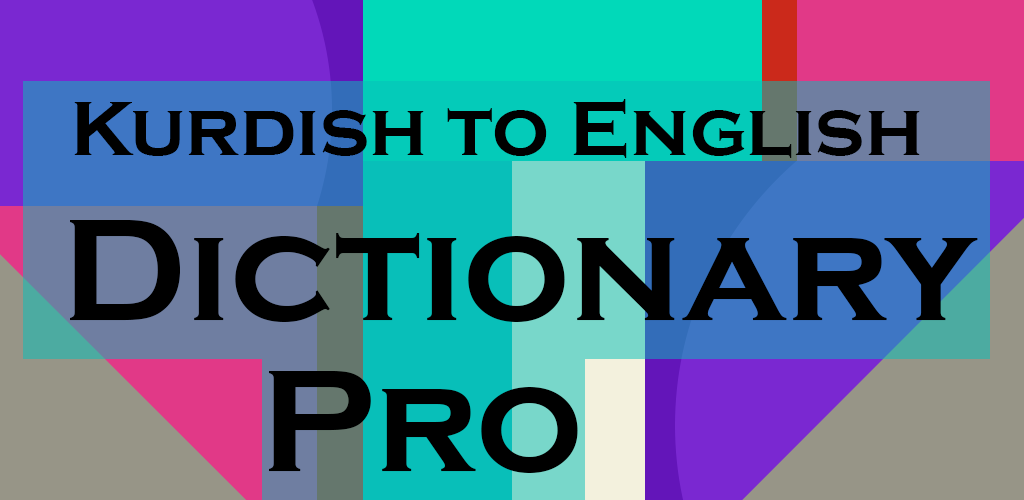
<style>
.page{position:relative;width:1024px;height:500px}
.page>*{position:absolute;margin:0}
.t1{font:80px "CopperplateGothic-Bold";color:#000000}
.t2{font:150px "CopperplateGothic-Bold";color:#000000}
</style>
<div class="page">
<p class="t1" style="left:74px;top:99px;width:846px;height:59px">Kurdish to English</p>
<p class="t2" style="left:70px;top:220px;width:908px;height:102px">Dictionary</p>
<p class="t2" style="left:269px;top:371px;width:309px;height:102px">Pro</p>
</div>
